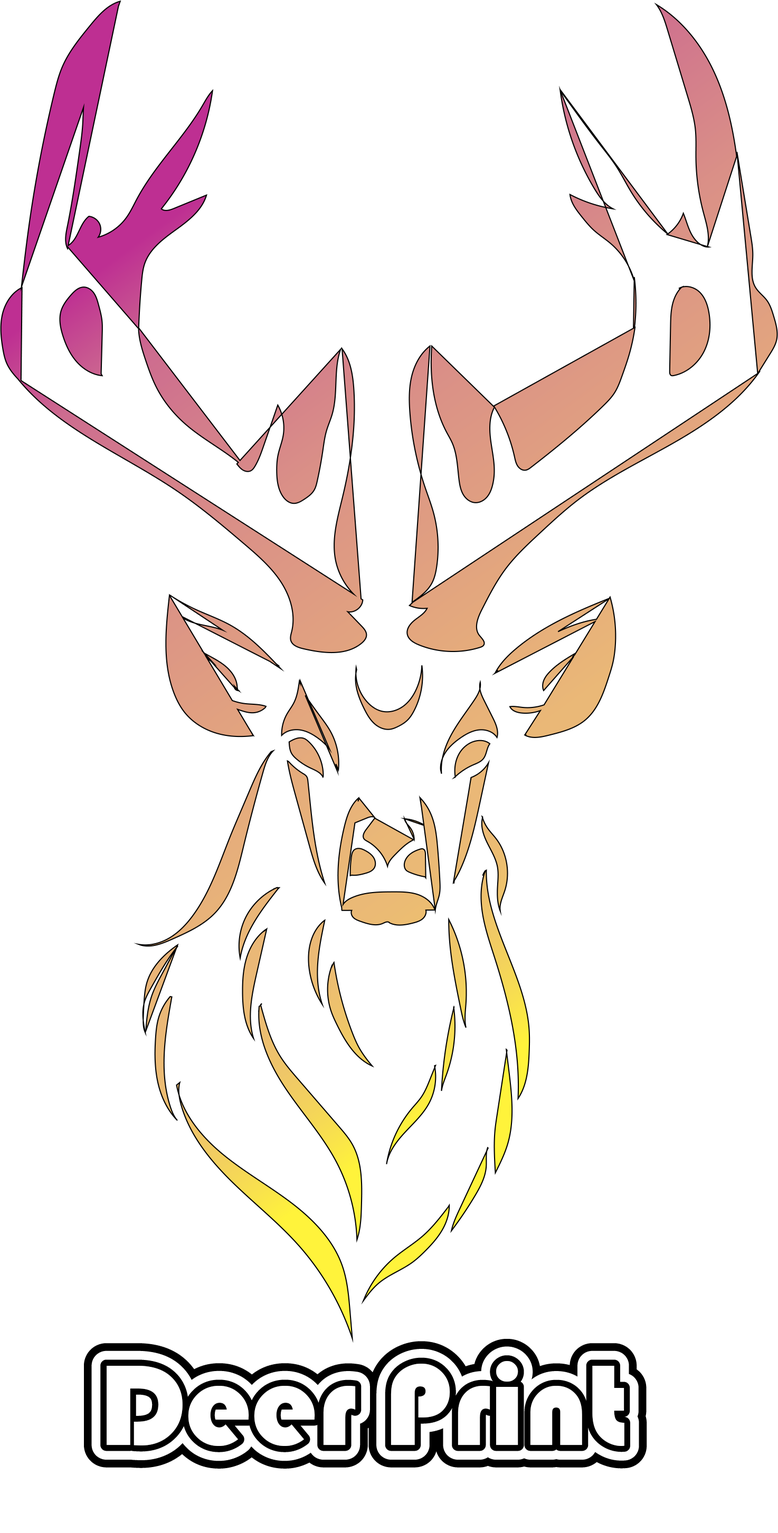
<style>
.page{position:relative;width:778px;height:1533px;background:#ffffff}
.page>*{position:absolute;margin:0}
.t1{font:118.7px "Bauhaus93";color:#ffffff}
</style>
<div class="page">
<p class="t1" style="left:107px;top:1361px;width:517px;height:85px">Deer Print</p>
<p class="t1" style="left:107px;top:1361px;width:517px;height:85px">Deer Print</p>
</div>
